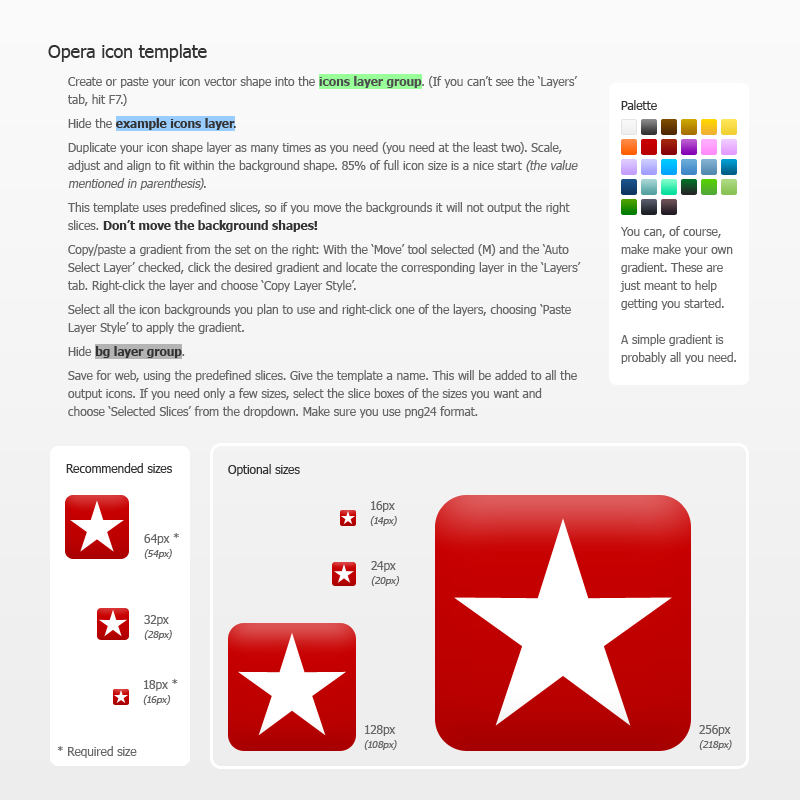
<style>
.page{position:relative;width:800px;height:800px}
.page>*{position:absolute;margin:0}
.t1{font:12px/18px "Tahoma";color:#666666}
.t2{font:18px/18px "Tahoma";color:#333333}
.t3{font:18px/22px "Tahoma";color:#333333}
.t4{font:12px/22px "Tahoma";color:#666666}
.t5{font:12px/18px "Tahoma-Bold";color:#4d4d4d}
.t6{font:12px/18px "Tahoma-Bold";color:#333333}
.t7{font:12px/18px "Tahoma";color:#333333}
.t8{font:12px/18px "Tahoma";color:#666666;font-style:italic}
.t9{font:12px "Tahoma";color:#333333}
.t10{font:10px/14px "Tahoma";color:#666666;font-style:italic}
.t11{font:12px "Tahoma";color:#666666}
</style>
<div class="page">
<p class="t1" style="left:48px;top:44px;width:533px;height:374px"><span class="t2">Ope</span><span class="t3">ra icon template<br></span><span class="t4">C</span>reate or paste your icon vector shape into the <span class="t5">icons layer group</span>. (If you can’t see the ‘Layers’ tab, hit F7.)<br>Hide the <span class="t6">example icons layer</span><span class="t7">.<br></span>Duplicate your icon shape layer as many times as you need (you need at the least two). Scale, adjust and align to fit within the background shape. 85% of full icon size is a nice start <span class="t8">(the value mentioned in parenthesis)</span>.<br>This template uses predefined slices, so if you move the backgrounds it will not output the right slices. <span class="t6">Don’t move the background shapes! <br></span>Copy/paste a gradient from the set on the right: With the ‘Move’ tool selected (M) and the ‘Auto Select Layer’ checked, click the desired gradient and locate the corresponding layer in the ‘Layers’ tab. Right-click the layer and choose ‘Copy Layer Style’.<br>Select all the icon backgrounds you plan to use and right-click one of the layers, choosing ‘Paste Layer Style’ to apply the gradient.<br>Hide <span class="t6">bg layer group</span>.<br>Save for web, using the predefined slices. Give the template a name. This will be added to all the output icons. If you need only a few sizes, select the slice boxes of the sizes you want and choose ‘Selected Slices’ from the dropdown. Make sure you use png24 format.</p>
<p class="t1" style="left:620px;top:100px;width:116px;height:264px"><span class="t7">Palette<br></span><br><br><br><br><br><br>You can, of course, make make your own gradient. These are just meant to help getting you started.<br><br>A simple gradient is probably all you need.</p>
<p class="t9" style="left:66px;top:463px;width:106px;height:10px">Recommended sizes</p>
<p class="t9" style="left:228px;top:464px;width:72px;height:12px">Optional sizes</p>
<p class="t10" style="left:370px;top:501px;width:27px;height:25px"><span class="t1">16px<br></span>(14px)</p>
<p class="t1" style="left:144px;top:533px;width:35px;height:26px">64px *<br><span class="t10">(54px)</span></p>
<p class="t10" style="left:371px;top:561px;width:29px;height:25px"><span class="t1">24px<br></span>(20px)</p>
<p class="t10" style="left:144px;top:615px;width:28px;height:25px"><span class="t1">32px<br></span>(28px)</p>
<p class="t1" style="left:143px;top:679px;width:35px;height:26px">18px *<br><span class="t10">(16px)</span></p>
<p class="t10" style="left:364px;top:725px;width:33px;height:25px"><span class="t1">128px<br></span>(108px)</p>
<p class="t10" style="left:699px;top:725px;width:33px;height:25px"><span class="t1">256px<br></span>(218px)</p>
<p class="t11" style="left:57px;top:746px;width:80px;height:12px">* Required size</p>
</div>
